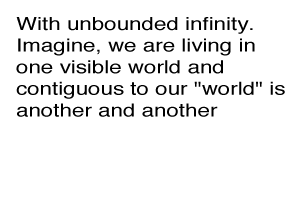
<style>
.page{position:relative;width:300px;height:200px;background:#ffffff}
.page>*{position:absolute;margin:0}
.t1{font:18px "Helvetica";color:#000000;scale:1.24 1}
</style>
<div class="page">
<p class="t1" style="left:16px;top:17px;width:269px;height:100px">With unbounded infinity. <br>Imagine, we are living in <br>one visible world and <br>contiguous to our "world" is <br>another and another</p>
</div>
